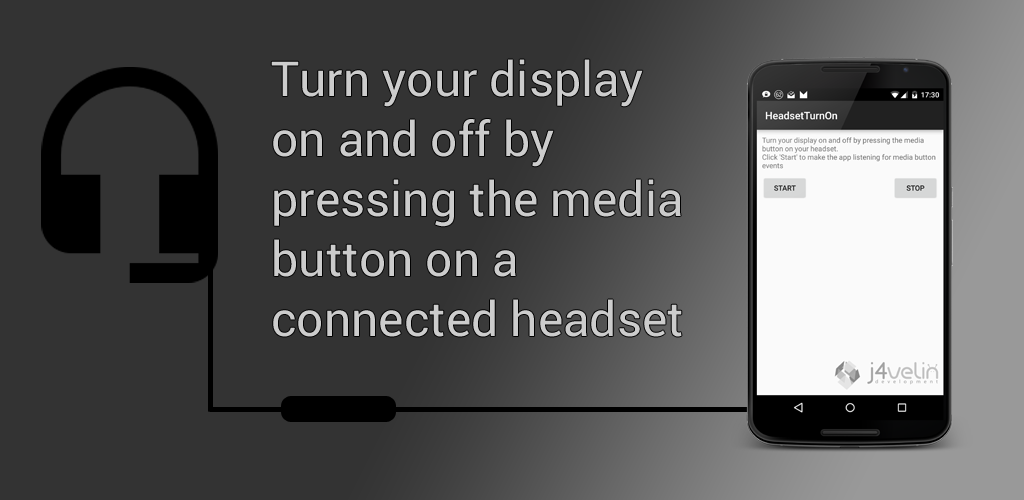
<style>
.page{position:relative;width:1024px;height:500px;background:#333333}
.page>*{position:absolute;margin:0}
.t1{font:48px/60px "Roboto-Regular";color:#cccccc}
</style>
<div class="page">
<p class="t1" style="left:271px;top:59px;width:411px;height:278px">Turn your display <br>on and off by <br>pressing the media <br>button on a <br>connected headset</p>
</div>
